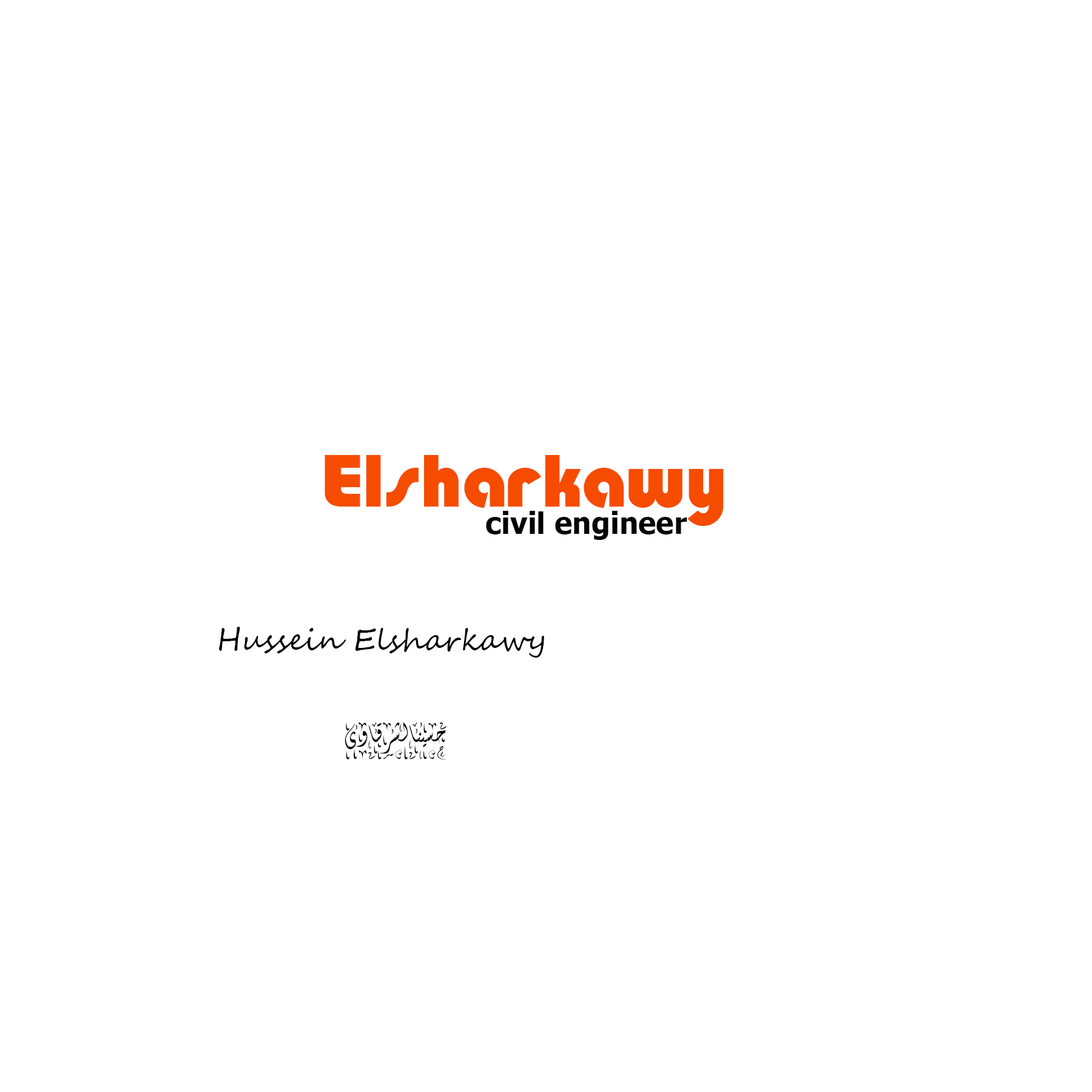
<style>
.page{position:relative;width:1092px;height:1092px;background:#ffffff}
.page>*{position:absolute;margin:0}
.t1{font:71.8px "TaurusHeavyNormal";color:#f64c00}
.t2{font:29.9px "Tahoma-Bold";color:#030303}
.t3{font:29.9px "SegoeScript";color:#030303}
.t4{font:29.9px "Traditional-Arabic";color:#030303}
</style>
<div class="page">
<p class="t1" style="left:325px;top:455px;width:399px;height:71px">Elsharkawy</p>
<p class="t2" style="left:486px;top:511px;width:201px;height:29px">civil engineer</p>
<p class="t3" style="left:219px;top:627px;width:325px;height:31px">Hussein Elsharkawy</p>
<p class="t4" style="left:345px;top:722px;width:102px;height:38px">حسين الشرقاوى</p>
</div>
